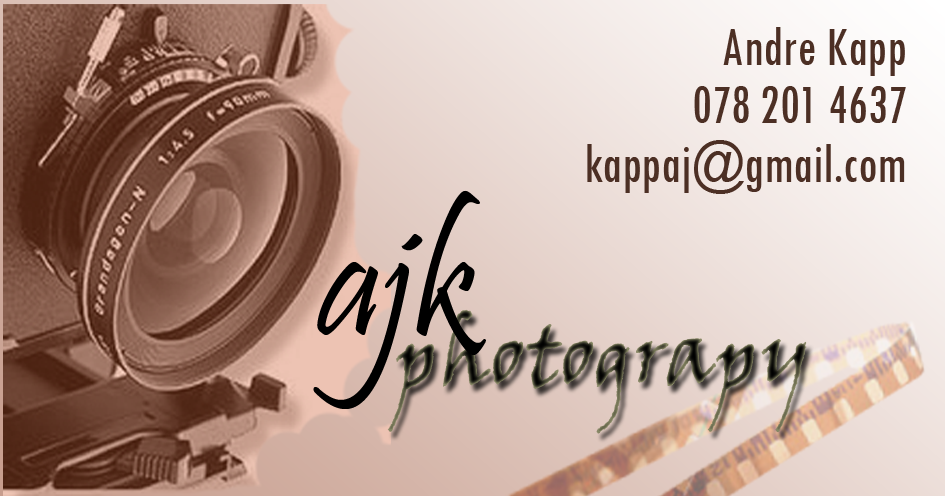
<style>
.page{position:relative;width:945px;height:496px}
.page>*{position:absolute;margin:0}
.t1{font:58.2px/58.2px "TwCenMT-Condensed";color:#4c2f24;scale:0.92 1}
.t2{font:174.6px "Pristina-Regular";color:#000000;scale:0.92 1}
.t3{font:87.3px "VinerHandITC";scale:0.92 1}
</style>
<div class="page">
<p class="t1" style="left:587px;top:27px;width:319px;height:167px;text-align:right">Andre Kapp<br>078 201 4637<br>kappaj@gmail.com</p>
<p class="t2" style="left:313px;top:190px;width:173px;height:219px">ajk</p>
<p class="t3" style="left:387px;top:309px;width:420px;height:125px">photograpy</p>
</div>
